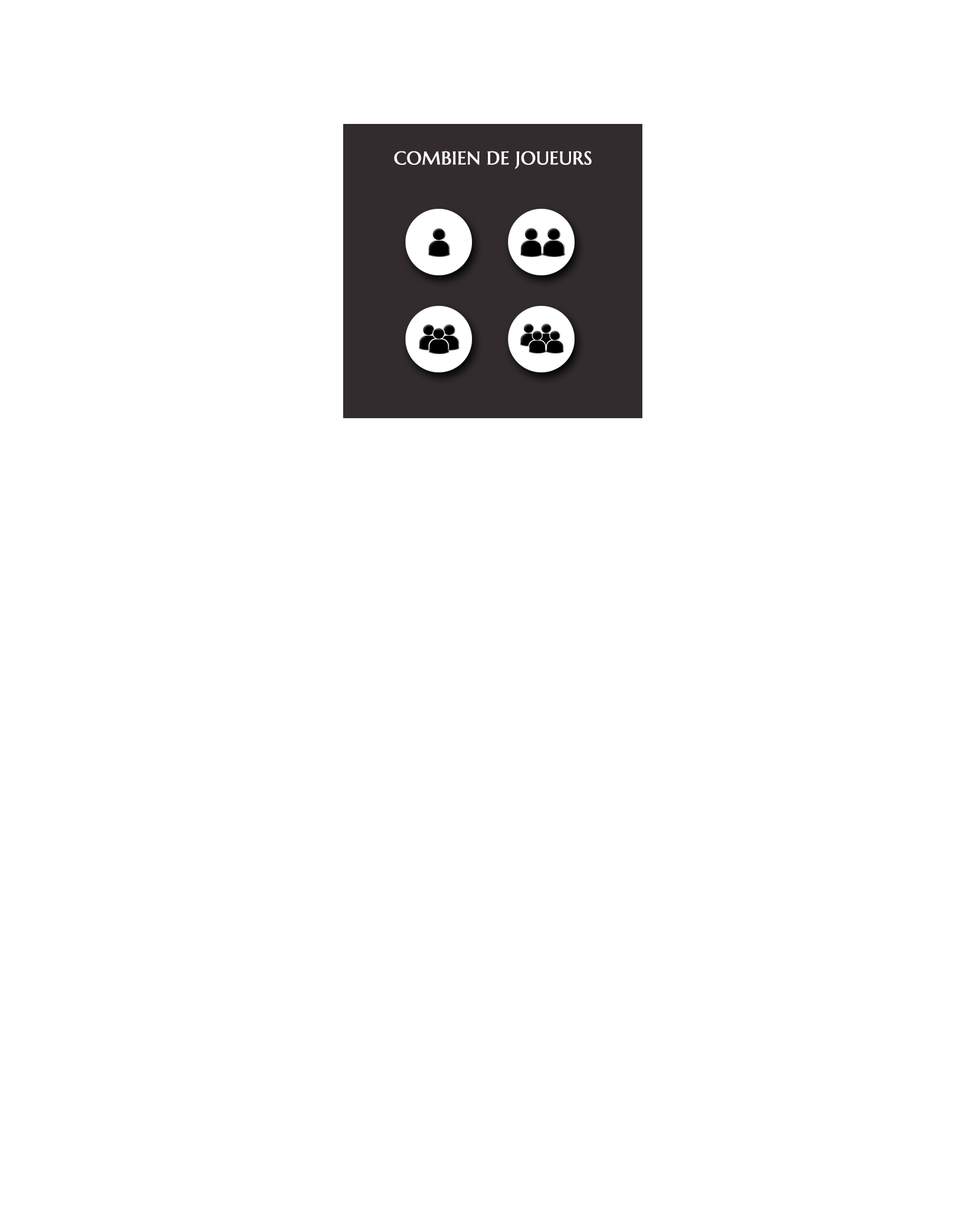
<style>
.page{position:relative;width:977px;height:1221px;background:#ffffff}
.page>*{position:absolute;margin:0}
.t1{font:18.3px "MarcellusSC-Regular";color:#ffffff;text-transform:uppercase;font-weight:bold}
</style>
<div class="page">
<p class="t1" style="left:394px;top:151px;width:198px;height:18px">Combien de joueurs</p>
</div>
